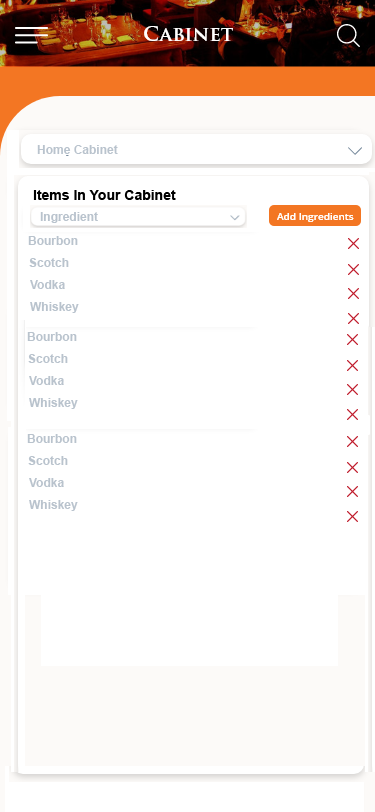
<style>
.page{position:relative;width:375px;height:812px;background:#ffffff}
.page>*{position:absolute;margin:0}
.t1{font:12px "Arial-BoldMT";color:#b9c3cd}
</style>
<div class="page">
<p class="t1" style="left:37px;top:145px;width:81px;height:9px">Home Cabinet</p>
<p class="t1" style="left:40px;top:212px;width:58px;height:11px">Ingredient</p>
<p class="t1" style="left:28px;top:236px;width:50px;height:9px">Bourbon</p>
<p class="t1" style="left:29px;top:258px;width:40px;height:9px">Scotch</p>
<p class="t1" style="left:30px;top:280px;width:35px;height:9px">Vodka</p>
<p class="t1" style="left:30px;top:302px;width:49px;height:11px">Whiskey</p>
</div>
